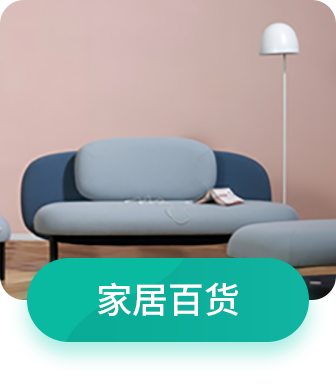
<style>
.page{position:relative;width:336px;height:390px}
.page>*{position:absolute;margin:0}
.t1{font:36px "SourceHanSansCN-Medium";color:#ffffff}
</style>
<div class="page">
<p class="t1" style="left:98px;top:282px;width:140px;height:34px">家居百货</p>
</div>
